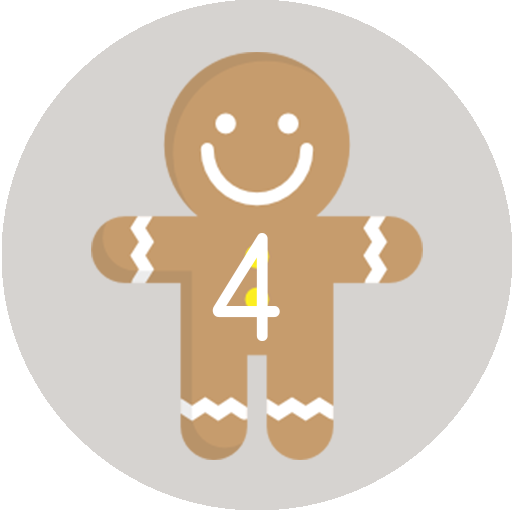
<style>
.page{position:relative;width:512px;height:512px;background:#d6d3d0}
.page>*{position:absolute;margin:0}
.t1{font:170.7px "Antipasto";color:#ffffff}
</style>
<div class="page">
<p class="t1" style="left:212px;top:233px;width:68px;height:108px">4</p>
</div>
